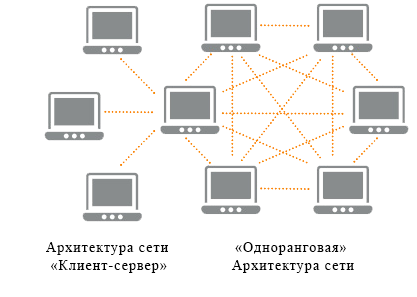
<style>
.page{position:relative;width:417px;height:297px;background:#ffffff}
.page>*{position:absolute;margin:0}
.t1{font:14px/18px "TimesNewRomanPSMT";letter-spacing:0.075em;color:#000000}
</style>
<div class="page">
<p class="t1" style="left:46px;top:242px;width:122px;height:31px">Архитектура сети<br> «Клиент-сервер»</p>
<p class="t1" style="left:231px;top:242px;width:123px;height:31px;text-align:center">«Одноранговая» <br>Архитектура сети</p>
</div>
